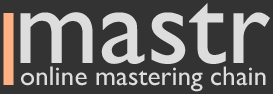
<style>
.page{position:relative;width:273px;height:94px;background:#333333}
.page>*{position:absolute;margin:0}
.t1{font:110.3px "GillSansMT";color:#dddddd}
.t2{font:27.3px "GillSansMT";color:#dddddd}
</style>
<div class="page">
<p class="t1" style="left:20px;top:3px;width:250px;height:61px">mastr</p>
<p class="t2" style="left:21px;top:66px;width:245px;height:26px">online mastering chain</p>
</div>
